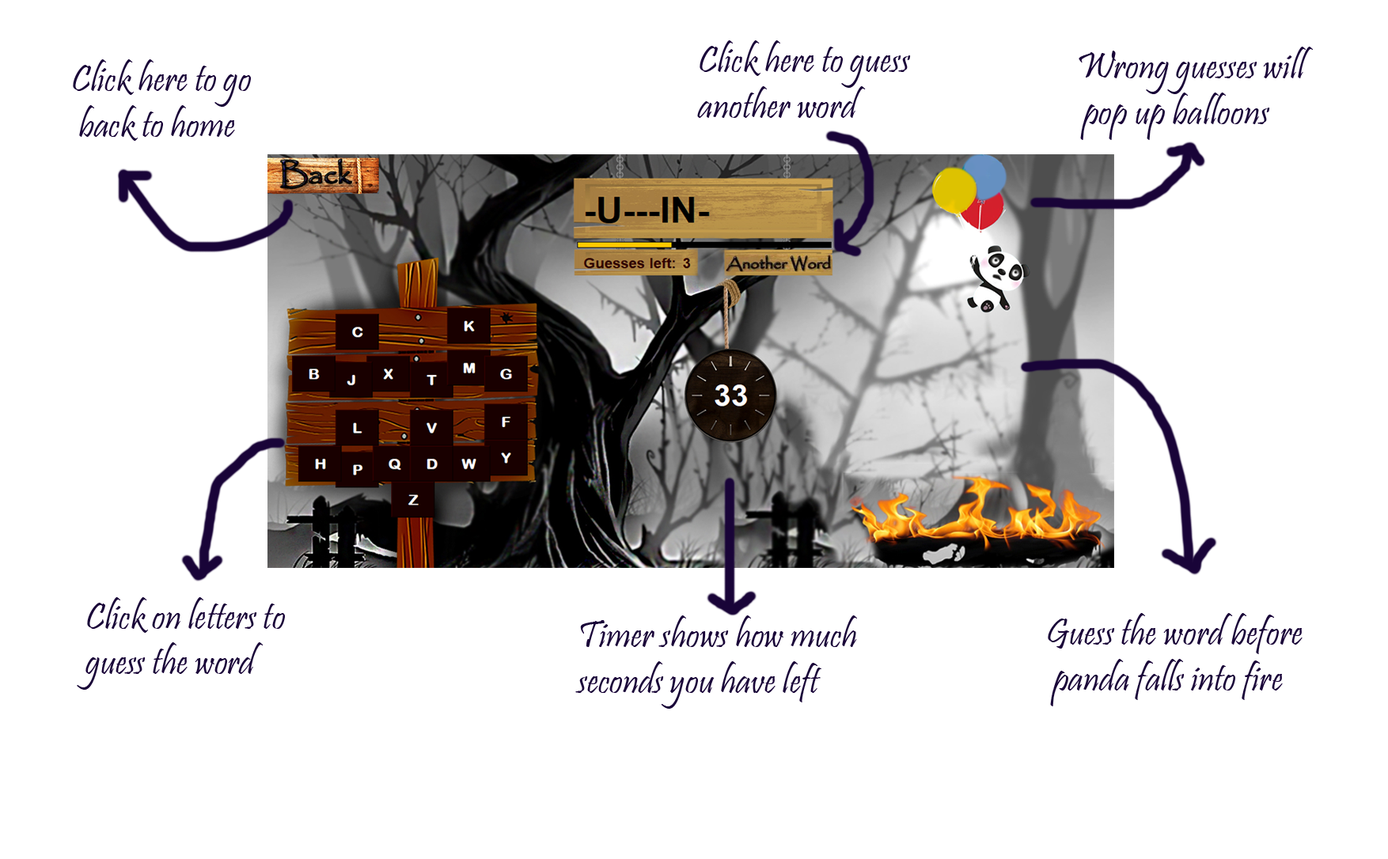
<style>
.page{position:relative;width:1388px;height:859px;background:#ffffff}
.page>*{position:absolute;margin:0}
.t1{font:38px "Pristina-Regular";color:#190438}
</style>
<div class="page">
<p class="t1" style="left:697px;top:40px;width:214px;height:78px">Click here to guess <br>another word</p>
<p class="t1" style="left:1078px;top:47px;width:235px;height:93px">Wrong guesses will<br> pop up balloons</p>
<p class="t1" style="left:73px;top:59px;width:178px;height:82px">Click here to go<br> back to home</p>
<p class="t1" style="left:77px;top:597px;width:208px;height:93px">Click on letters to <br>guess the word</p>
<p class="t1" style="left:575px;top:616px;width:282px;height:93px">Timer shows how much<br>seconds you have left</p>
<p class="t1" style="left:1048px;top:613px;width:254px;height:94px">Guess the word before<br> panda falls into fire</p>
</div>
